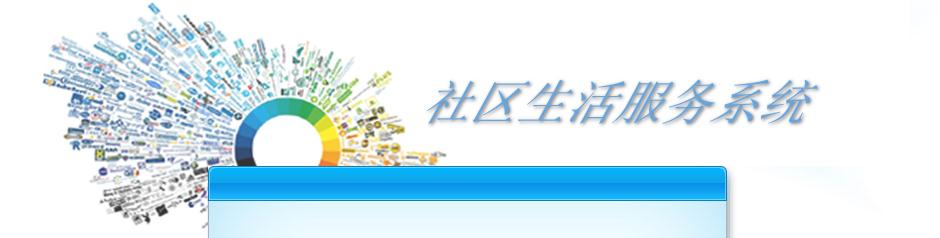
<style>
.page{position:relative;width:940px;height:238px;background:#ffffff}
.page>*{position:absolute;margin:0}
.t1{font:54.7px "SimSun";color:#65a5e0;scale:0.88 1}
</style>
<div class="page">
<p class="t1" style="left:427px;top:79px;width:391px;height:45px">社区生活服务系统</p>
</div>
